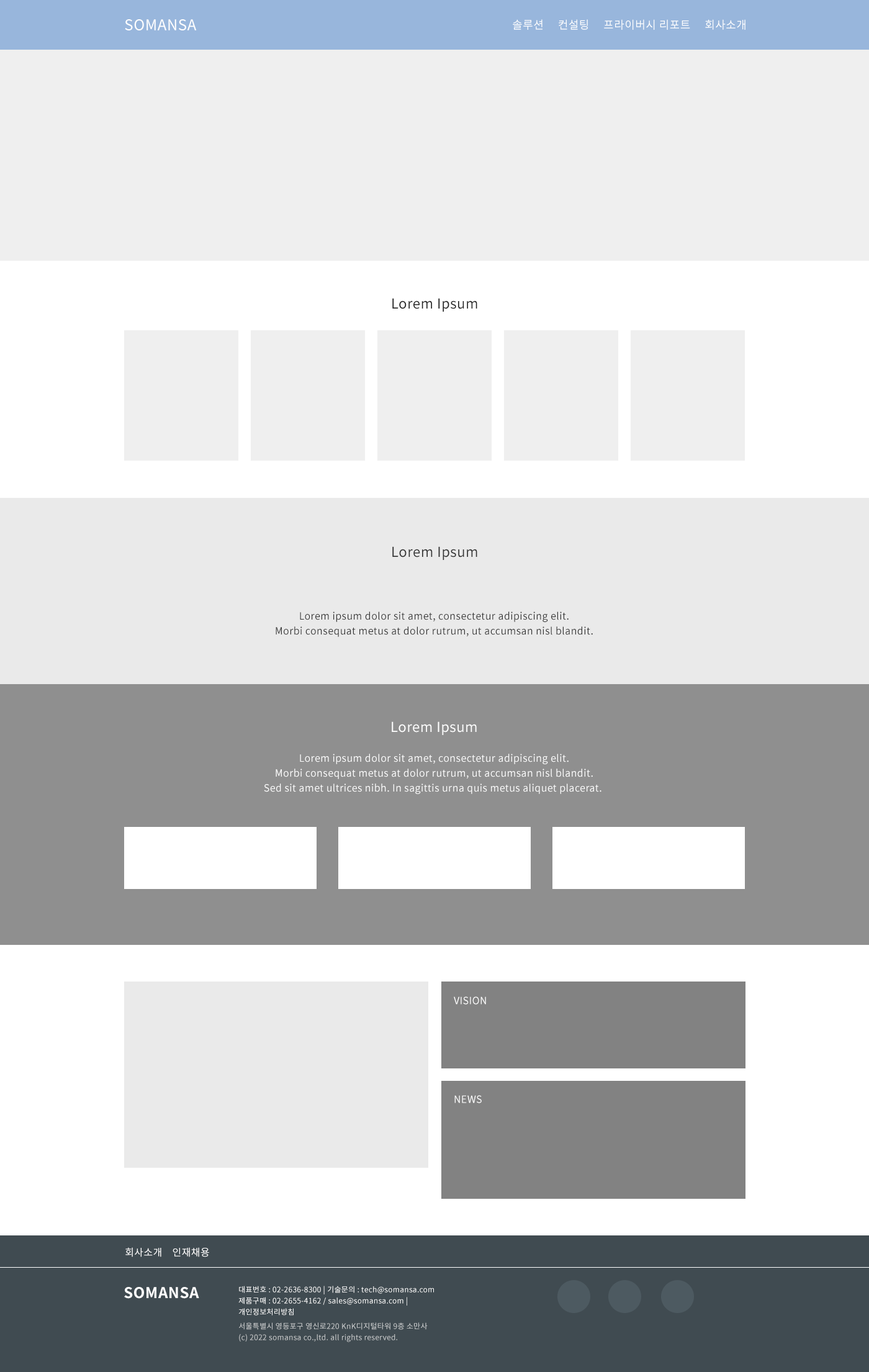
<style>
.page{position:relative;width:869px;height:1372px;background:#ffffff}
.page>*{position:absolute;margin:0}
.t1{font:14.9px "NotoSansKR-Regular";letter-spacing:0.025em;color:#ffffff}
.t2{font:11.2px "NotoSansKR-Regular";letter-spacing:0.025em;color:#ffffff}
.t3{font:13.7px "NotoSansKR-Regular";letter-spacing:0.025em;color:#222222}
.t4{font:13.7px "NotoSansKR-Regular";letter-spacing:0.025em;color:#313131}
.t5{font:9.9px/14.9px "NotoSansKR-Regular";letter-spacing:0.025em;color:#313131}
.t6{font:13.7px "NotoSansKR-Regular";letter-spacing:0.025em;color:#ffffff}
.t7{font:9.9px/14.9px "NotoSansKR-Regular";letter-spacing:0.025em;color:#ffffff}
.t8{font:9.9px "NotoSansKR-Regular";letter-spacing:0.025em;color:#ffffff}
.t9{font:14.9px "NotoSansKR-Bold";letter-spacing:0.025em;color:#ffffff}
.t10{font:7.4px/11.2px "NotoSansKR-Regular";letter-spacing:0.025em;color:#ffffff}
.t11{font:7.4px/11.2px "NotoSansKR-Regular";letter-spacing:0.025em;color:#cbcdcf}
</style>
<div class="page">
<p class="t1" style="left:125px;top:19px;width:72px;height:11px">SOMANSA</p>
<p class="t2" style="left:513px;top:19px;width:233px;height:11px">솔루션     컨설팅     프라이버시 리포트     회사소개</p>
<p class="t3" style="left:392px;top:298px;width:85px;height:14px">Lorem Ipsum</p>
<p class="t4" style="left:392px;top:546px;width:85px;height:14px">Lorem Ipsum</p>
<p class="t5" style="left:276px;top:611px;width:317px;height:26px;text-align:center">Lorem ipsum dolor sit amet, consectetur adipiscing elit.<br>Morbi consequat metus at dolor rutrum, ut accumsan nisl blandit.</p>
<p class="t6" style="left:392px;top:721px;width:85px;height:14px">Lorem Ipsum</p>
<p class="t7" style="left:264px;top:754px;width:338px;height:40px;text-align:center">Lorem ipsum dolor sit amet, consectetur adipiscing elit.<br>Morbi consequat metus at dolor rutrum, ut accumsan nisl blandit.<br>Sed sit amet ultrices nibh. In sagittis urna quis metus aliquet placerat.</p>
<p class="t8" style="left:454px;top:996px;width:32px;height:8px">VISION</p>
<p class="t8" style="left:454px;top:1095px;width:28px;height:8px">NEWS</p>
<p class="t8" style="left:125px;top:1247px;width:84px;height:10px">회사소개    인재채용</p>
<p class="t9" style="left:124px;top:1287px;width:75px;height:12px">SOMANSA</p>
<p class="t10" style="left:238px;top:1286px;width:196px;height:29px">대표번호 : 02-2636-8300 | 기술문의 : tech@somansa.com<br>제품구매 : 02-2655-4162 / sales@somansa.com |<br>개인정보처리방침</p>
<p class="t11" style="left:239px;top:1322px;width:189px;height:20px">서울특별시 영등포구 영신로220 KnK디지털타워 9층 소만사<br>(c) 2022 somansa co.,ltd. all rights reserved.</p>
</div>
